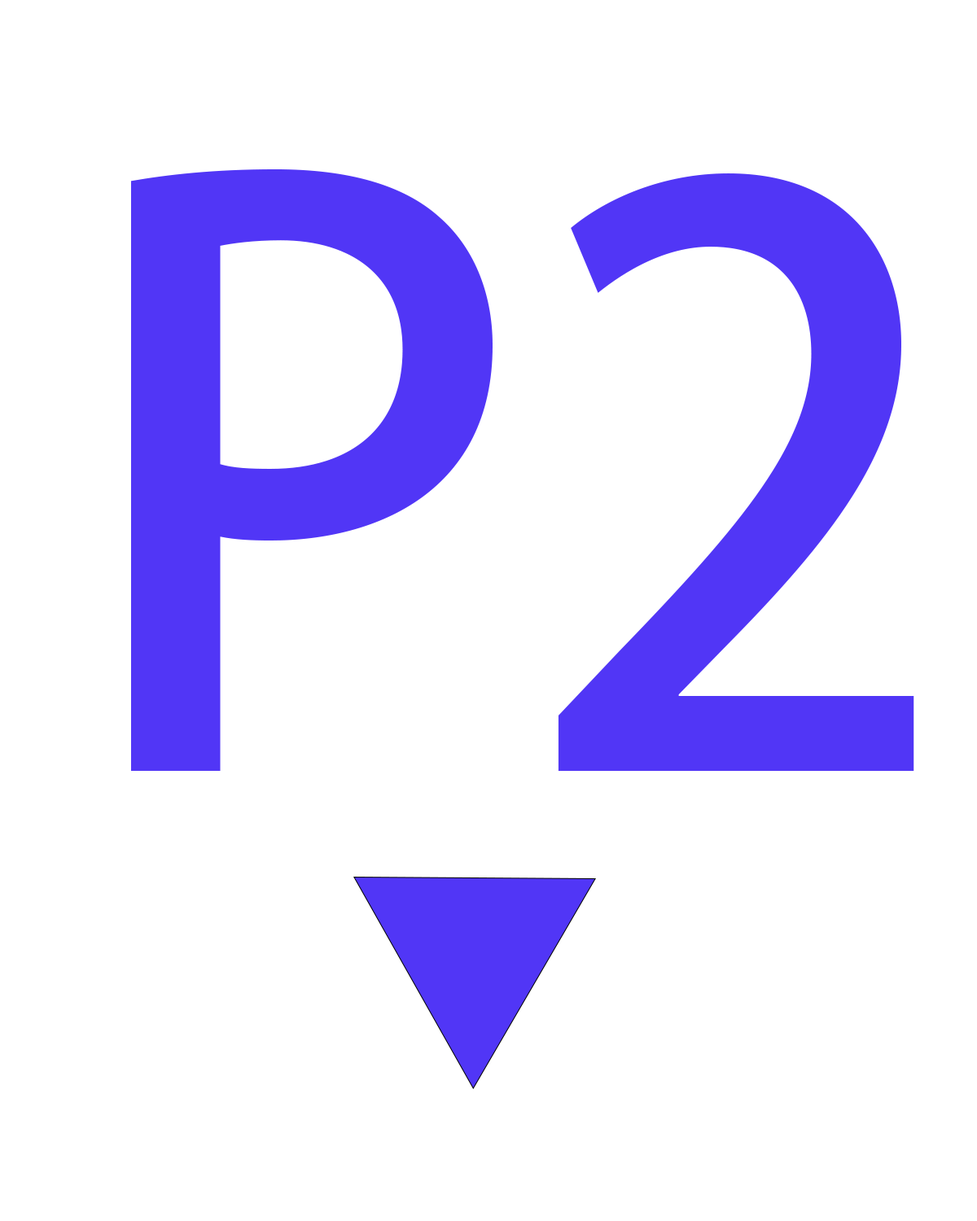
<style>
.page{position:relative;width:977px;height:1221px;background:#ffffff}
.page>*{position:absolute;margin:0}
.t1{font:187.1px "AdobeHeitiStd-Regular";color:#5136f6}
</style>
<div class="page">
<p class="t1" style="left:131px;top:169px;width:783px;height:603px">P2</p>
</div>
